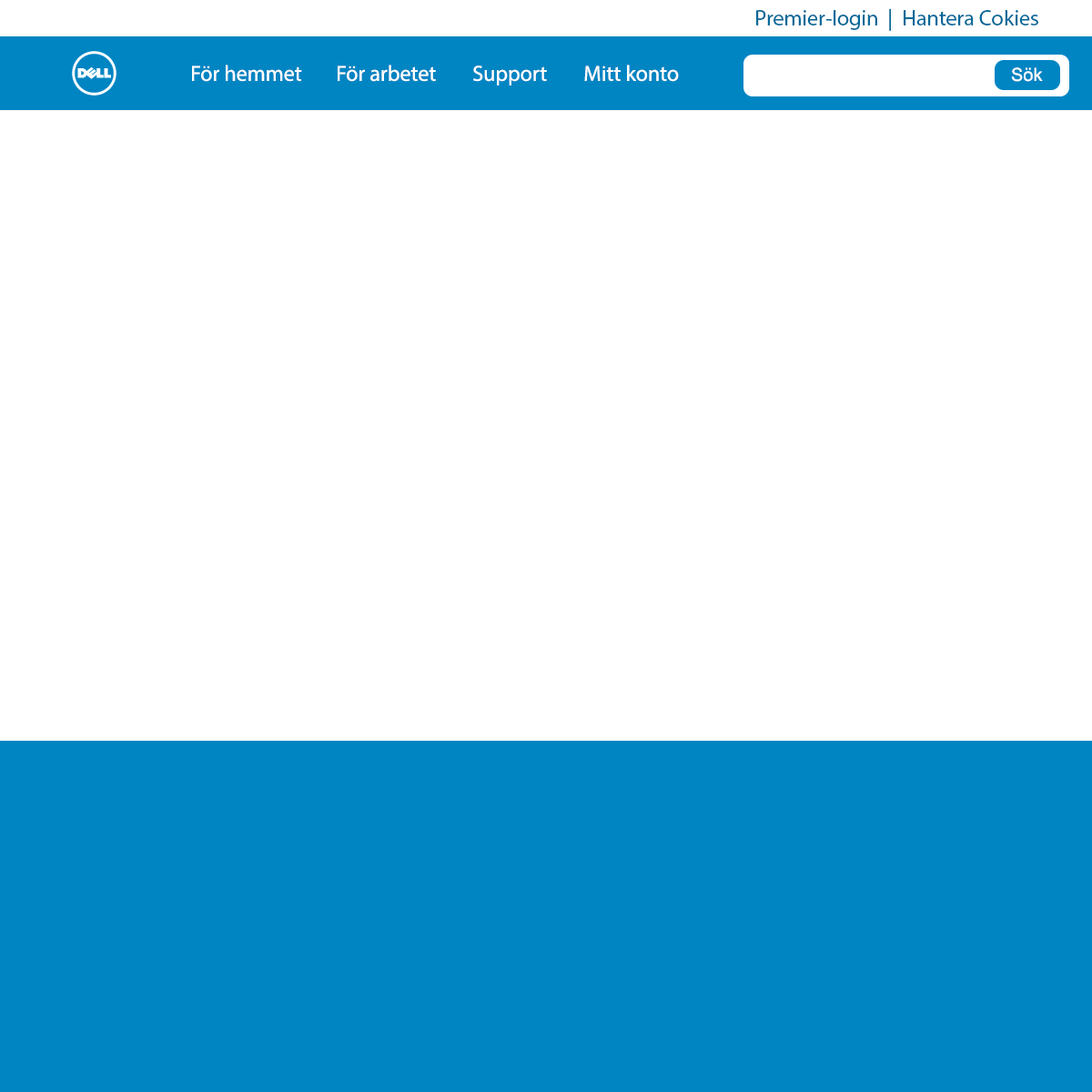
<style>
.page{position:relative;width:1092px;height:1092px;background:#ffffff}
.page>*{position:absolute;margin:0}
.t1{font:21.8px "MyriadPro-Regular";color:#026999}
.t2{font:21.8px "MyriadPro-Regular";color:#ffffff}
.t3{font:18.2px "ArialMT";color:#ffffff}
</style>
<div class="page">
<p class="t1" style="left:756px;top:8px;width:282px;height:23px">Premier-login  |  Hantera Cokies</p>
<p class="t2" style="left:192px;top:65px;width:110px;height:17px">För hemmet</p>
<p class="t2" style="left:338px;top:65px;width:98px;height:17px">För arbetet</p>
<p class="t2" style="left:473px;top:66px;width:74px;height:20px">Support</p>
<p class="t2" style="left:584px;top:65px;width:95px;height:17px">Mitt konto</p>
<p class="t3" style="left:1011px;top:67px;width:32px;height:15px">Sök</p>
</div>
